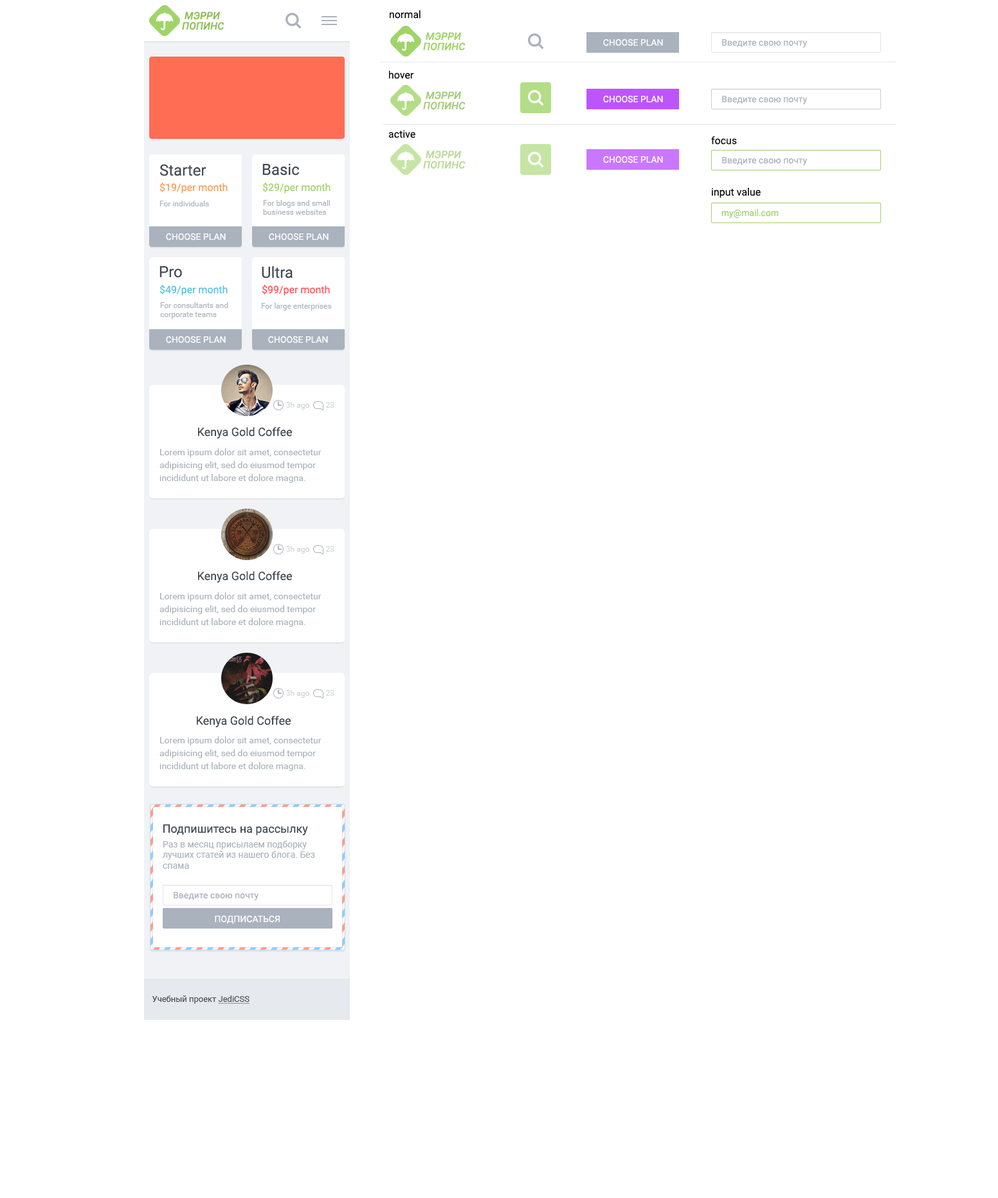
<style>
.page{position:relative;width:998px;height:1198px;background:#ffffff}
.page>*{position:absolute;margin:0}
.t1{font:10.3px/10.3px "Roboto-MediumItalic";color:#8cc152;text-transform:uppercase}
.t2{font:10.3px "Roboto-Regular";color:#020202}
.t3{font:10.3px/10.3px "Roboto-MediumItalic";color:#a0d468;text-transform:uppercase}
.t4{font:9px "Roboto-Regular";color:#ffffff;text-transform:uppercase}
.t5{font:9px "Roboto-Regular";color:#aab2bd}
.t6{font:10.3px/10.3px "Roboto-MediumItalic";color:#a3cd75;text-transform:uppercase}
.t7{font:10.3px/10.3px "Roboto-MediumItalic";color:#bada97;text-transform:uppercase}
.t8{font:15.4px "Roboto-Regular";color:#434a54}
.t9{font:10.3px "Roboto-Regular";color:#fc9d51}
.t10{font:10.3px "Roboto-Regular";color:#a0d468}
.t11{font:7.7px "Roboto-Regular";color:#aab2bd}
.t12{font:9px "Roboto-Regular";color:#a0d468}
.t13{font:10.3px "Roboto-Regular";color:#55c1e7}
.t14{font:10.3px "Roboto-Regular";color:#ff5555}
.t15{font:7.7px "Roboto-Regular";color:#cfd3d9}
.t16{font:11.6px "Roboto-Regular";color:#434a54}
.t17{font:9px/12.9px "Roboto-Regular";color:#aab2bd}
.t18{font:8.4px "Roboto-Regular";color:#434a54}
.t19{font:8.4px "Roboto-Regular";color:#434a54;text-decoration:underline}
</style>
<div class="page">
<p class="t1" style="left:182px;top:12px;width:42px;height:18px">Мэрри <br>попинс</p>
<p class="t2" style="left:390px;top:10px;width:30px;height:9px">normal</p>
<p class="t3" style="left:423px;top:32px;width:42px;height:19px">Мэрри <br>попинс</p>
<p class="t4" style="left:603px;top:39px;width:60px;height:7px">Choose plan</p>
<p class="t5" style="left:722px;top:39px;width:85px;height:9px">Введите свою почту</p>
<p class="t2" style="left:389px;top:71px;width:25px;height:8px">hover</p>
<p class="t6" style="left:423px;top:91px;width:42px;height:19px">Мэрри <br>попинс</p>
<p class="t4" style="left:603px;top:95px;width:60px;height:8px">Choose plan</p>
<p class="t5" style="left:722px;top:96px;width:85px;height:8px">Введите свою почту</p>
<p class="t2" style="left:388px;top:130px;width:27px;height:8px">active</p>
<p class="t2" style="left:711px;top:136px;width:26px;height:9px">focus</p>
<p class="t7" style="left:423px;top:150px;width:42px;height:19px">Мэрри <br>попинс</p>
<p class="t4" style="left:603px;top:156px;width:60px;height:7px">Choose plan</p>
<p class="t5" style="left:722px;top:157px;width:85px;height:8px">Введите свою почту</p>
<p class="t8" style="left:159px;top:164px;width:47px;height:12px">Starter</p>
<p class="t8" style="left:262px;top:163px;width:37px;height:12px">Basic</p>
<p class="t9" style="left:159px;top:182px;width:69px;height:11px">$19/per month</p>
<p class="t10" style="left:262px;top:182px;width:68px;height:11px">$29/per month</p>
<p class="t2" style="left:712px;top:188px;width:48px;height:10px">input value</p>
<p class="t11" style="left:159px;top:201px;width:50px;height:5px">For individuals</p>
<p class="t11" style="left:263px;top:200px;width:67px;height:15px">For blogs and small business websites</p>
<p class="t12" style="left:721px;top:209px;width:57px;height:10px">my@mail.com</p>
<p class="t4" style="left:166px;top:233px;width:60px;height:7px">Choose plan</p>
<p class="t4" style="left:269px;top:233px;width:59px;height:7px">Choose plan</p>
<p class="t8" style="left:159px;top:265px;width:23px;height:13px">Pro</p>
<p class="t8" style="left:262px;top:266px;width:30px;height:12px">Ultra</p>
<p class="t13" style="left:159px;top:284px;width:69px;height:12px">$49/per month</p>
<p class="t14" style="left:262px;top:284px;width:68px;height:12px">$99/per month</p>
<p class="t11" style="left:160px;top:302px;width:68px;height:17px">For consultants and <br>corporate teams</p>
<p class="t11" style="left:261px;top:303px;width:71px;height:7px">For large enterprises</p>
<p class="t4" style="left:166px;top:336px;width:60px;height:7px">Choose plan</p>
<p class="t4" style="left:268px;top:336px;width:60px;height:7px">Choose plan</p>
<p class="t15" style="left:286px;top:402px;width:23px;height:7px">3h ago</p>
<p class="t15" style="left:325px;top:402px;width:9px;height:6px">23</p>
<p class="t16" style="left:198px;top:427px;width:94px;height:11px">Kenya Gold Coffee</p>
<p class="t17" style="left:159px;top:448px;width:162px;height:35px">Lorem ipsum dolor sit amet, consectetur adipisicing elit, sed do eiusmod tempor incididunt ut labore et dolore magna.</p>
<p class="t15" style="left:286px;top:546px;width:23px;height:7px">3h ago</p>
<p class="t15" style="left:325px;top:546px;width:9px;height:6px">23</p>
<p class="t16" style="left:198px;top:571px;width:94px;height:11px">Kenya Gold Coffee</p>
<p class="t17" style="left:159px;top:592px;width:162px;height:35px">Lorem ipsum dolor sit amet, consectetur adipisicing elit, sed do eiusmod tempor incididunt ut labore et dolore magna.</p>
<p class="t15" style="left:286px;top:690px;width:23px;height:7px">3h ago</p>
<p class="t15" style="left:325px;top:690px;width:9px;height:6px">23</p>
<p class="t16" style="left:197px;top:715px;width:94px;height:12px">Kenya Gold Coffee</p>
<p class="t17" style="left:159px;top:736px;width:162px;height:35px">Lorem ipsum dolor sit amet, consectetur adipisicing elit, sed do eiusmod tempor incididunt ut labore et dolore magna.</p>
<p class="t16" style="left:163px;top:824px;width:145px;height:11px">Подпишитесь на рассылку</p>
<p class="t5" style="left:163px;top:840px;width:152px;height:28px">Раз в месяц присылаем подборку лучших статей из нашего блога. Без спама</p>
<p class="t5" style="left:174px;top:892px;width:84px;height:8px">Введите свою почту</p>
<p class="t4" style="left:215px;top:915px;width:65px;height:9px">подписаться</p>
<p class="t18" style="left:152px;top:995px;width:97px;height:8px">Учебный проект <span class="t19">JediCSS</span></p>
</div>
